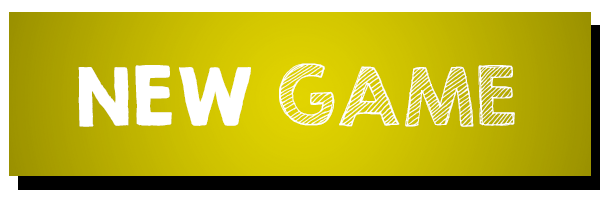
<style>
.page{position:relative;width:600px;height:199px}
.page>*{position:absolute;margin:0}
.t1{font:72px "KGSecondChancesSketch";letter-spacing:0.025em;color:#ffffff;text-transform:uppercase}
.t2{font:72px "KGSecondChancesSolid";letter-spacing:0.025em;color:#ffffff;text-transform:uppercase}
</style>
<div class="page">
<p class="t1" style="left:78px;top:63px;width:437px;height:64px"><span class="t2">new </span>GAME</p>
</div>
